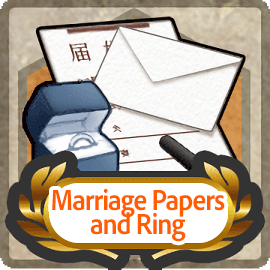
<style>
.page{position:relative;width:270px;height:270px}
.page>*{position:absolute;margin:0}
.t1{font:30px/24px "AdobeClean-Bold";letter-spacing:-0.04em;color:#ff5d00;scale:0.9 1}
</style>
<div class="page">
<p class="t1" style="left:52px;top:188px;width:173px;height:54px;text-align:center">Marriage Papers<br>and Ring</p>
</div>
